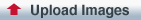
<style>
.page{position:relative;width:141px;height:20px;background:#f9f9f9}
.page>*{position:absolute;margin:0}
.t1{font:14px "Helvetica-Bold";color:#364149}
</style>
<div class="page">
<p class="t1" style="left:31px;top:4px;width:98px;height:14px">Upload Images</p>
</div>
